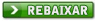
<style>
.page{position:relative;width:95px;height:21px}
.page>*{position:absolute;margin:0}
.t1{font:12px "BellGothicStd-Black";color:#edebeb}
</style>
<div class="page">
<p class="t1" style="left:28px;top:5px;width:60px;height:10px">REBAIXAR</p>
</div>
